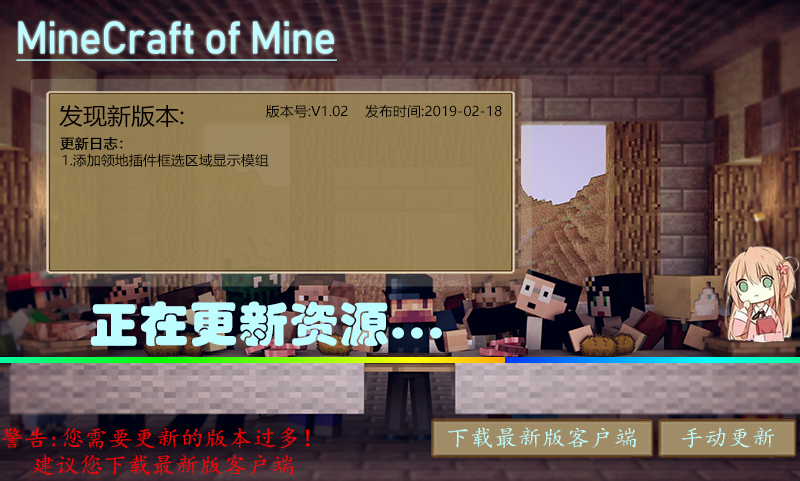
<style>
.page{position:relative;width:800px;height:481px}
.page>*{position:absolute;margin:0}
.t1{font:45px "Bahnschrift";letter-spacing:0.04em;color:#befdff;text-decoration:underline;scale:0.96 1}
.t2{font:22.8px "MicrosoftYaHei";color:#000000;scale:1.05 1}
.t3{font:13.3px "MicrosoftYaHei";color:#000000;scale:1.05 1}
.t4{font:13.3px "MicrosoftYaHei";color:#000000;font-weight:bold;scale:1.05 1}
.t5{font:47.5px "STHupo";color:#befdff;scale:1.05 1}
.t6{font:22.8px "¿¬Ìå";color:#ff0000;scale:1.05 1}
.t7{font:22.8px "¿¬Ìå";color:#bffdff;scale:1.05 1}
.t8{font:22.9px "¿¬Ìå";color:#ff0000;scale:1.05 1}
</style>
<div class="page">
<p class="t1" style="left:16px;top:21px;width:321px;height:40px">MineCraft of Mine</p>
<p class="t2" style="left:59px;top:105px;width:125px;height:22px">发现新版本:</p>
<p class="t3" style="left:266px;top:104px;width:236px;height:14px">版本号:V1.02    发布时间:2019-02-18</p>
<p class="t4" style="left:60px;top:137px;width:63px;height:13px">更新日志：</p>
<p class="t3" style="left:62px;top:154px;width:207px;height:13px">1.添加领地插件框选区域显示模组</p>
<p class="t5" style="left:90px;top:301px;width:352px;height:46px">正在更新资源...</p>
<p class="t6" style="left:2px;top:427px;width:308px;height:22px">警告:您需要更新的版本过多！</p>
<p class="t7" style="left:448px;top:427px;width:188px;height:22px">下载最新版客户端</p>
<p class="t7" style="left:681px;top:427px;width:94px;height:21px">手动更新</p>
<p class="t8" style="left:33px;top:454px;width:261px;height:22px">建议您下载最新版客户端</p>
</div>
